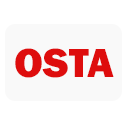
<style>
.page{position:relative;width:128px;height:128px;background:#ffffff}
.page>*{position:absolute;margin:0}
.t1{font:42px "FranklinGothic-Heavy";color:#de0d0d}
</style>
<div class="page">
<p class="t1" style="left:15px;top:48px;width:99px;height:30px">OSTA</p>
</div>
